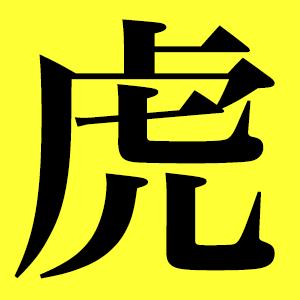
<style>
.page{position:relative;width:300px;height:300px;background:#ffff36}
.page>*{position:absolute;margin:0}
.t1{font:277.8px "HiraMinProN-W6";color:#000000}
</style>
<div class="page">
<p class="t1" style="left:14px;top:19px;width:261px;height:260px">虎</p>
</div>
